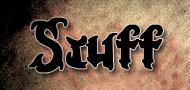
<style>
.page{position:relative;width:190px;height:90px;background:#000000}
.page>*{position:absolute;margin:0}
.t1{font:96px "KingdomHearts";letter-spacing:-0.05em;color:#000000;font-weight:bold}
</style>
<div class="page">
<p class="t1" style="left:28px;top:17px;width:135px;height:56px">Stuff</p>
</div>
